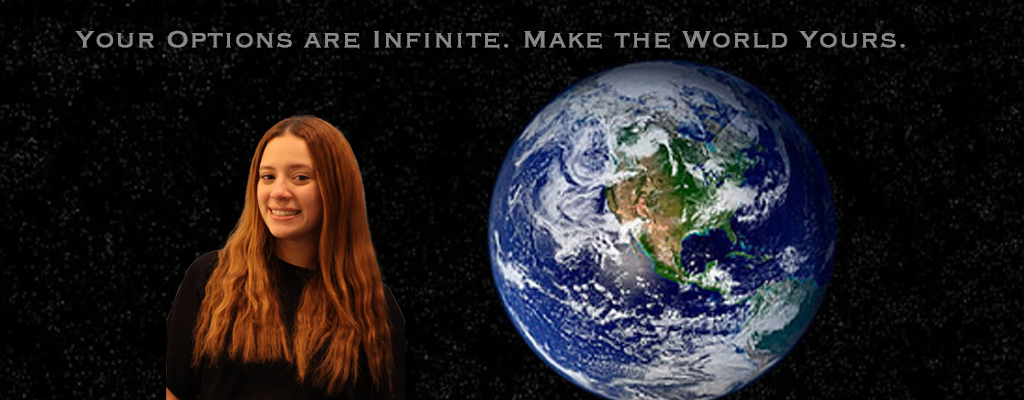
<style>
.page{position:relative;width:1024px;height:400px}
.page>*{position:absolute;margin:0}
.t1{font:30.8px "Copperplate-Light";color:#888888;font-weight:bold}
</style>
<div class="page">
<p class="t1" style="left:75px;top:31px;width:830px;height:18px">Your Options are Infinite. Make the World Yours.</p>
</div>
